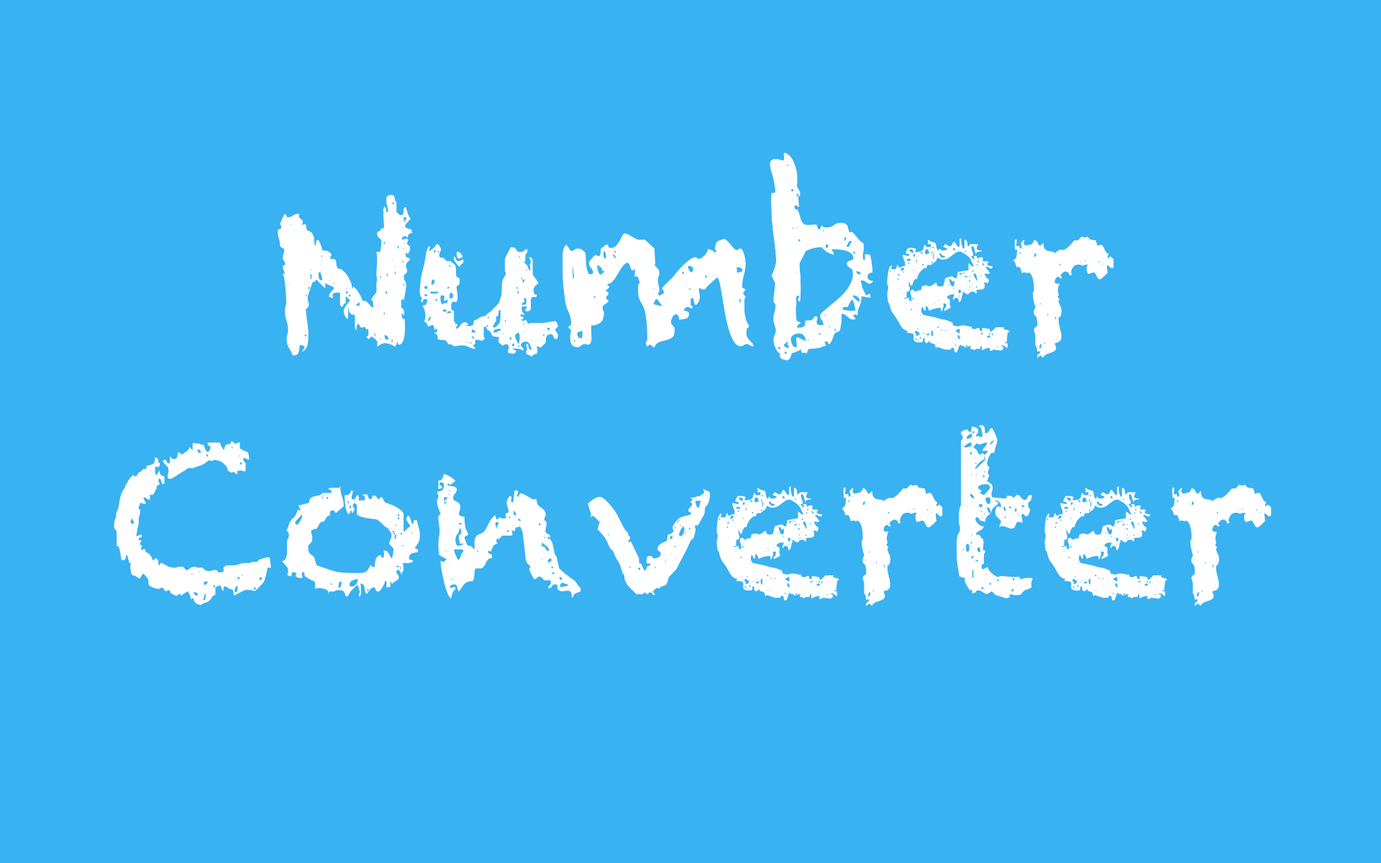
<style>
.page{position:relative;width:1381px;height:863px;background:#39b2f1}
.page>*{position:absolute;margin:0}
.t1{font:207.2px "Chalkduster";color:#ffffff}
</style>
<div class="page">
<p class="t1" style="left:114px;top:153px;width:1158px;height:453px;text-align:center">Number<br>Converter</p>
</div>
